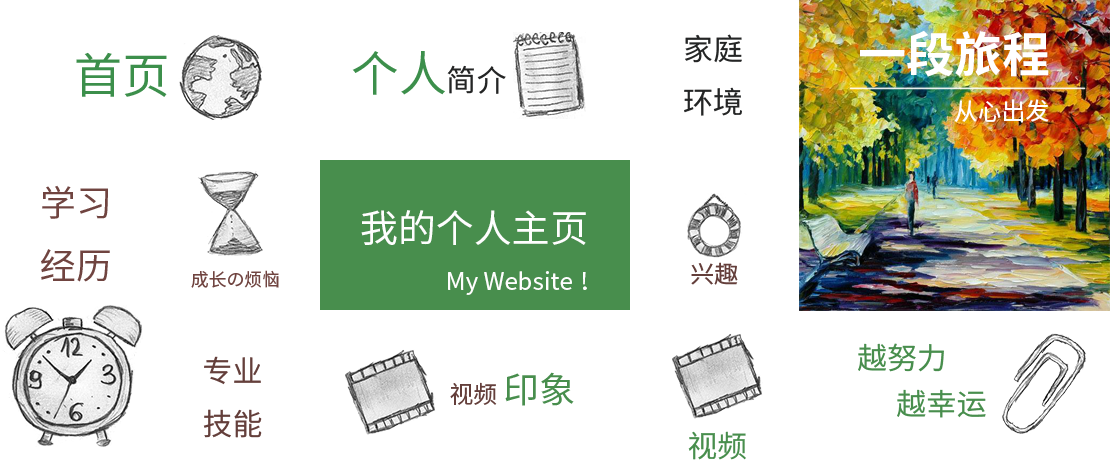
<style>
.page{position:relative;width:1110px;height:470px;background:#ffffff}
.page>*{position:absolute;margin:0}
.t1{font:48px "SourceHanSansCN-Bold";color:#ffffff}
.t2{font:30px "SourceHanSansCN-Regular";color:#242525}
.t3{font:48px "SourceHanSansCN-Regular";color:#3c8f4b}
.t4{font:24px "SourceHanSansCN-Regular";color:#ffffff}
.t5{font:36px "SourceHanSansCN-Regular";color:#704440}
.t6{font:38px "SourceHanSansCN-Regular";color:#fefefe}
.t7{font:18px "SourceHanSansCN-Regular";color:#704440}
.t8{font:24px "SourceHanSansCN-Regular";color:#643f3b}
.t9{font:24px "SourceHanSansCN-Regular";color:#fefefe}
.t10{font:30px "SourceHanSansCN-Regular";color:#488e4d}
.t11{font:30px "SourceHanSansCN-Regular";color:#643f3b}
.t12{font:36px "SourceHanSansCN-Regular";color:#488e4d}
</style>
<div class="page">
<p class="t1" style="left:860px;top:30px;width:189px;height:47px">一段旅程</p>
<p class="t2" style="left:684px;top:34px;width:58px;height:82px">家庭<br>环境</p>
<p class="t3" style="left:76px;top:52px;width:91px;height:45px">首页</p>
<p class="t3" style="left:352px;top:51px;width:154px;height:44px">个人<span class="t2">简介</span></p>
<p class="t4" style="left:954px;top:99px;width:95px;height:24px">从心出发</p>
<p class="t5" style="left:41px;top:185px;width:69px;height:97px">学习<br>经历</p>
<p class="t6" style="left:361px;top:210px;width:225px;height:35px">我的个人主页</p>
<p class="t7" style="left:191px;top:270px;width:88px;height:18px">成长の烦恼</p>
<p class="t8" style="left:691px;top:262px;width:47px;height:23px">兴趣</p>
<p class="t9" style="left:448px;top:271px;width:139px;height:24px">My Website！</p>
<p class="t10" style="left:858px;top:343px;width:86px;height:29px">越努力</p>
<p class="t11" style="left:203px;top:356px;width:59px;height:82px">专业<br>技能</p>
<p class="t8" style="left:450px;top:372px;width:124px;height:34px">视频 <span class="t12">印象</span></p>
<p class="t10" style="left:897px;top:389px;width:89px;height:29px">越幸运</p>
<p class="t10" style="left:688px;top:431px;width:58px;height:29px">视频</p>
</div>
